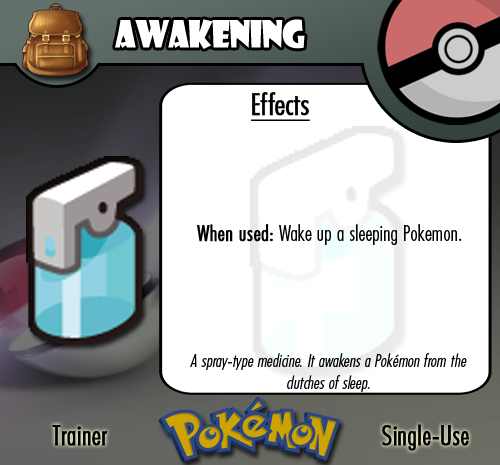
<style>
.page{position:relative;width:500px;height:465px;background:#ffffff}
.page>*{position:absolute;margin:0}
.t1{font:36.7px "ShowcardGothic-Reg";letter-spacing:-0.025em;color:#ffffff;scale:0.91 1}
.t2{font:22.2px "FuturaCondensedBQ-Light";color:#010101}
.t3{font:27.8px "FuturaCondensedBQ-Light";color:#010101;font-weight:bold}
.t4{font:30.6px "FuturaCondensedBQ-Light";color:#010101;font-weight:bold;text-decoration:underline}
.t5{font:22.2px "FuturaCondensedBQ-Light";color:#010101;font-weight:bold}
.t6{font:18.1px "FuturaCondensedBQ-Light";color:#010101;font-style:italic}
</style>
<div class="page">
<p class="t1" style="left:115px;top:19px;width:190px;height:30px">Awakening</p>
<p class="t2" style="left:197px;top:92px;width:265px;height:153px"><span class="t3">  </span><span class="t4">Effects<br><br><br><br></span><span class="t5">When used: </span>Wake up a sleeping Pokemon.</p>
<p class="t6" style="left:190px;top:353px;width:277px;height:39px;text-align:center">A spray-type medicine. It awakens a Pokémon from the clutches of sleep.</p>
<p class="t3" style="left:52px;top:425px;width:55px;height:21px">Trainer</p>
<p class="t3" style="left:382px;top:424px;width:87px;height:27px">Single-Use</p>
</div>
